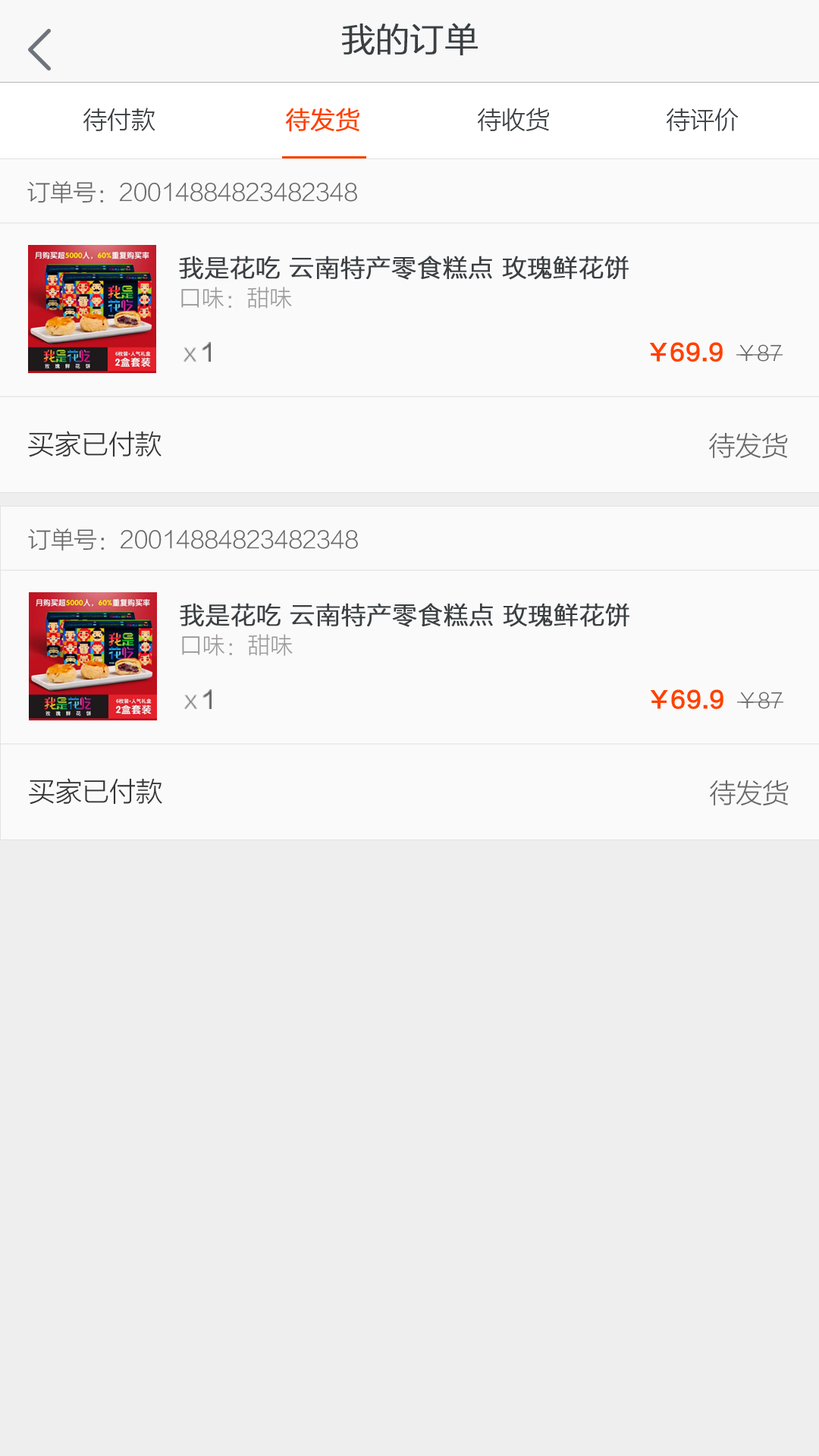
<style>
.page{position:relative;width:819px;height:1456px;background:#eeeeee}
.page>*{position:absolute;margin:0}
.t1{font:33.4px "FZLTXHK--GBK1-0";color:#3a3f42;font-weight:bold}
.t2{font:24.3px "FZLTXHK--GBK1-0";color:#3a3f42}
.t3{font:24.3px "FZLTXHK--GBK1-0";color:#ff4100;font-weight:bold}
.t4{font:23px "FZLTXHK--GBK1-0";color:#666666}
.t5{font:24.3px/30.7px "FZLTXHK--GBK1-0";color:#3a3f42;font-weight:bold}
.t6{font:22.7px/30.7px "FZLTXHK--GBK1-0";color:#999999}
.t7{font:23px "FZLTZHK--GBK1-0";color:#666666}
.t8{font:23px "FZLTZHK--GBK1-0";color:#ff4100}
.t9{font:20.5px "FZLTXHK--GBK1-0";color:#666666}
.t10{font:26.9px "FZLTXHK--GBK1-0";color:#333333}
.t11{font:26.9px "FZLTXHK--GBK1-0";color:#666666}
</style>
<div class="page">
<p class="t1" style="left:342px;top:23px;width:136px;height:32px">我的订单</p>
<p class="t2" style="left:83px;top:108px;width:656px;height:24px">待付款                   <span class="t3">待发货 </span>                待收货                 待评价</p>
<p class="t4" style="left:27px;top:181px;width:330px;height:22px">订单号：20014884823482348</p>
<p class="t5" style="left:179px;top:256px;width:450px;height:53px">我是花吃 云南特产零食糕点 玫瑰鲜花饼<br><span class="t6">口味：甜味</span></p>
<p class="t4" style="left:183px;top:342px;width:28px;height:20px">x <span class="t7">1</span></p>
<p class="t8" style="left:649px;top:342px;width:134px;height:20px">￥69.9  <span class="t9">￥87</span></p>
<p class="t10" style="left:28px;top:431px;width:134px;height:26px">买家已付款</p>
<p class="t11" style="left:709px;top:432px;width:79px;height:27px">待发货</p>
<p class="t4" style="left:28px;top:529px;width:330px;height:22px">订单号：20014884823482348</p>
<p class="t5" style="left:180px;top:603px;width:449px;height:53px">我是花吃 云南特产零食糕点 玫瑰鲜花饼<br><span class="t6">口味：甜味</span></p>
<p class="t4" style="left:184px;top:689px;width:28px;height:20px">x <span class="t7">1</span></p>
<p class="t8" style="left:650px;top:689px;width:133px;height:20px">￥69.9  <span class="t9">￥87</span></p>
<p class="t10" style="left:29px;top:778px;width:133px;height:27px">买家已付款</p>
<p class="t11" style="left:710px;top:780px;width:79px;height:26px">待发货</p>
</div>
